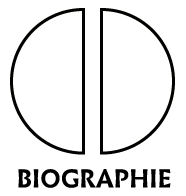
<style>
.page{position:relative;width:186px;height:196px;background:#ffffff}
.page>*{position:absolute;margin:0}
.t1{font:24px "Infini-Bold";color:#000000}
</style>
<div class="page">
<p class="t1" style="left:18px;top:169px;width:153px;height:19px">BIOGRAPHIE</p>
</div>
